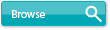
<style>
.page{position:relative;width:110px;height:30px;background:#4dc2cb}
.page>*{position:absolute;margin:0}
.t1{font:11px "MyriadPro-Regular";color:#ffffff}
</style>
<div class="page">
<p class="t1" style="left:12px;top:10px;width:33px;height:8px">Browse</p>
</div>
